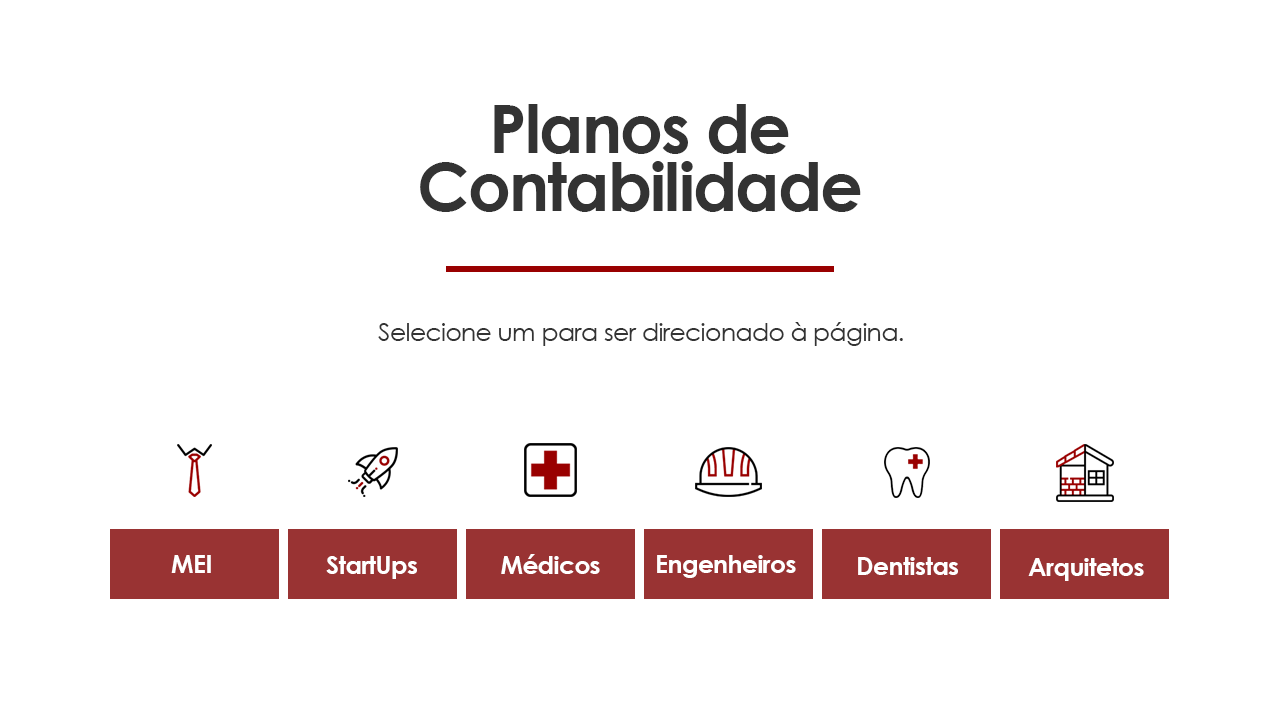
<style>
.page{position:relative;width:1280px;height:720px;background:#ffffff}
.page>*{position:absolute;margin:0}
.t1{font:66.7px/58.3px "CenturyGothic-Bold";letter-spacing:-0.025em;color:#333333}
.t2{font:25px "CenturyGothic";letter-spacing:-0.025em;color:#333333}
.t3{font:25px "CenturyGothic-Bold";letter-spacing:-0.025em;color:#ffffff}
</style>
<div class="page">
<p class="t1" style="left:420px;top:104px;width:441px;height:108px;text-align:center">Planos de<br>Contabilidade</p>
<p class="t2" style="left:378px;top:322px;width:525px;height:24px">Selecione um para ser direcionado à página.</p>
<p class="t3" style="left:171px;top:555px;width:40px;height:18px">MEI</p>
<p class="t3" style="left:326px;top:556px;width:91px;height:23px">StartUps</p>
<p class="t3" style="left:501px;top:554px;width:99px;height:20px">Médicos</p>
<p class="t3" style="left:657px;top:555px;width:139px;height:23px">Engenheiros</p>
<p class="t3" style="left:858px;top:557px;width:100px;height:18px">Dentistas</p>
<p class="t3" style="left:1028px;top:558px;width:116px;height:23px">Arquitetos</p>
</div>
